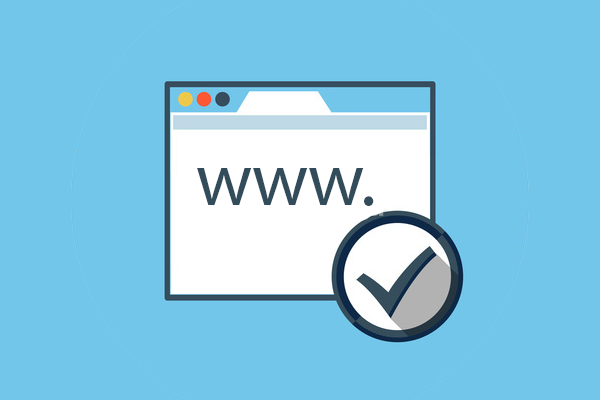
<style>
.page{position:relative;width:600px;height:400px;background:#72c6ea}
.page>*{position:absolute;margin:0}
.t1{font:77px "MyriadPro-Regular";letter-spacing:-0.022em;color:#324c5b}
</style>
<div class="page">
<p class="t1" style="left:197px;top:168px;width:177px;height:38px">www.</p>
</div>
